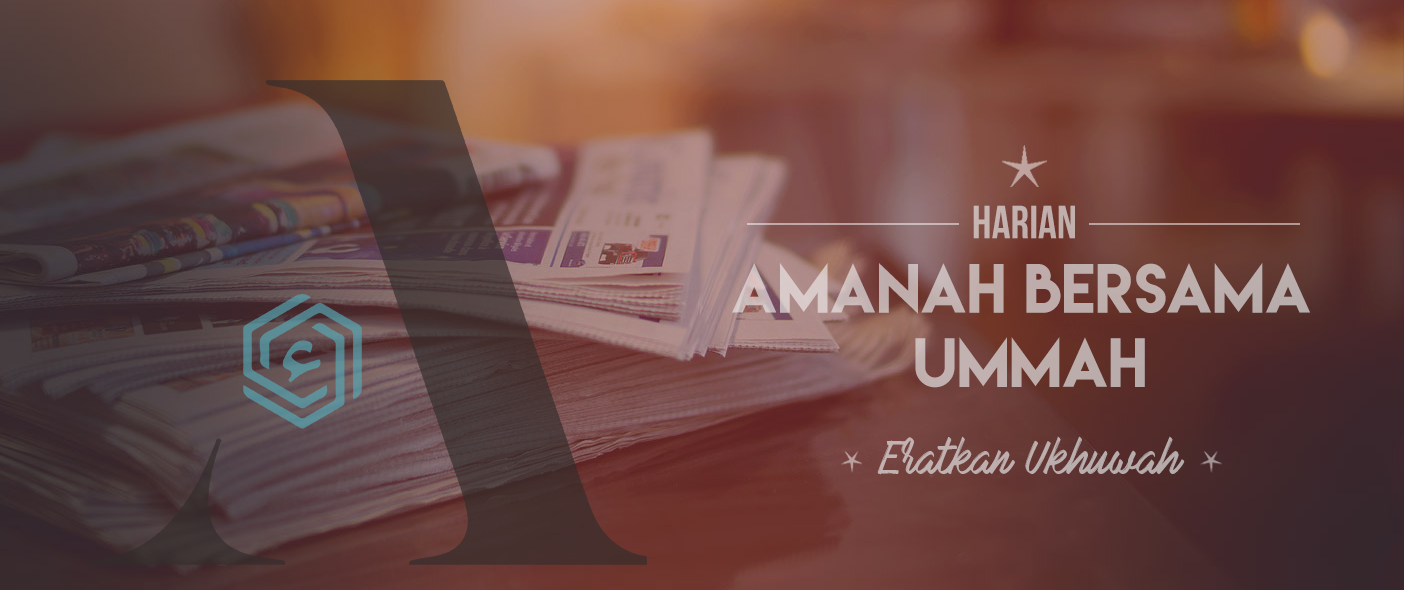
<style>
.page{position:relative;width:1404px;height:590px}
.page>*{position:absolute;margin:0}
.t1{font:62px "LemonMilk";color:#bfafad}
.t2{font:46.5px "BebasNeue";color:#bfafad}
.t3{font:41.3px "MarkMyWords";color:#bfafad}
</style>
<div class="page">
<p class="t1" style="left:732px;top:205px;width:578px;height:270px;text-align:center"><span class="t2">HARIAN <br></span>AMANAH BERSAMA <br>UMMAH<br><br><span class="t3">Eratkan Ukhuwah</span></p>
</div>
